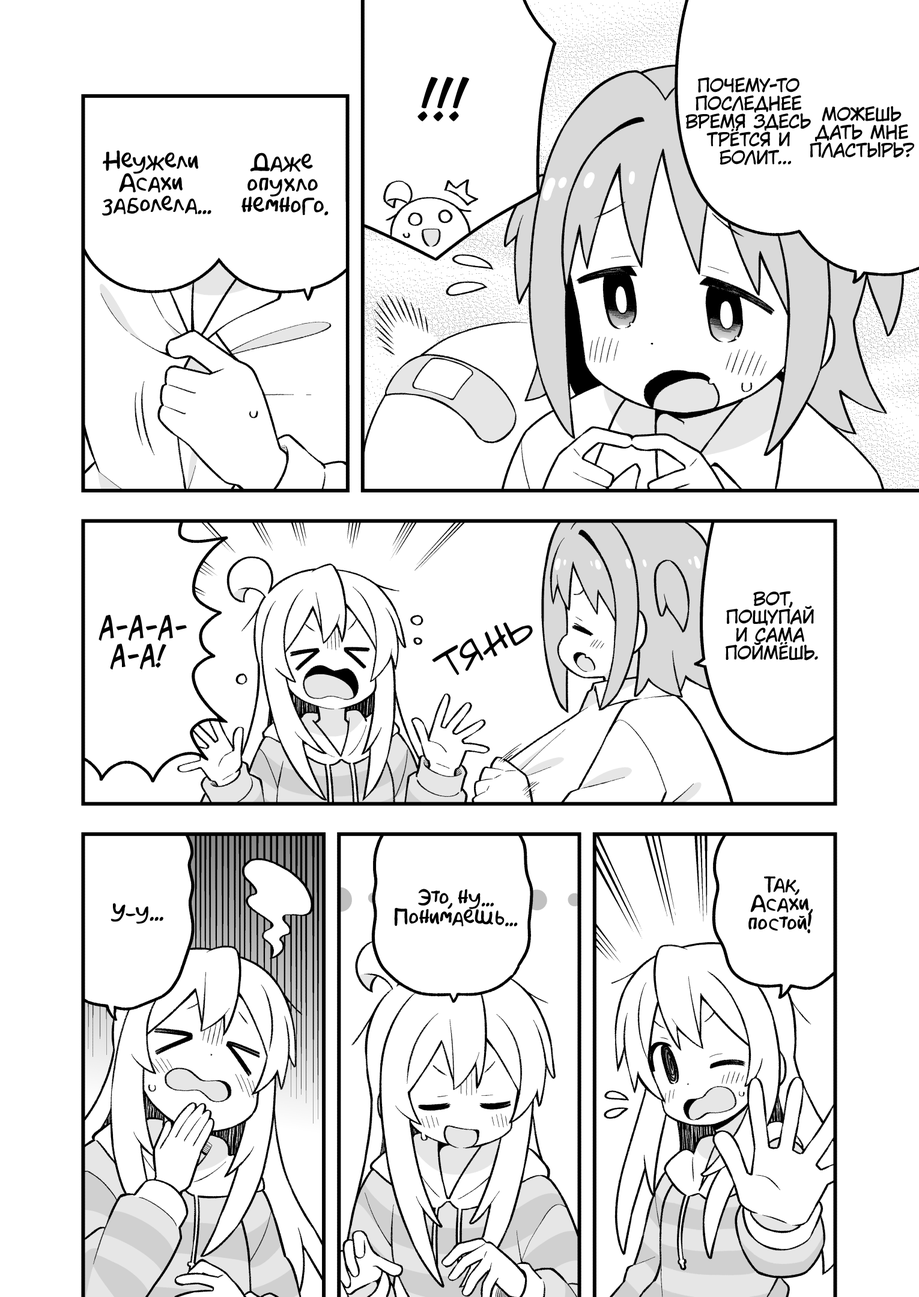
<style>
.page{position:relative;width:919px;height:1297px;background:#ffffff}
.page>*{position:absolute;margin:0}
.t1{font:54.1px "v_CCJeffCampbell";color:#000000;text-transform:uppercase}
.t2{font:18px "KuraiVoice2";color:#000000;text-transform:uppercase}
.t3{font:21.6px "AkbarPlain";color:#000000}
.t4{font:28.8px "v_CCJeffCampbell";color:#000000;text-transform:uppercase}
.t5{font:36px "v_Augie";color:#000000;text-transform:uppercase}
.t6{font:19.8px "AkbarPlain";color:#000000}
</style>
<div class="page">
<p class="t1" style="left:417px;top:77px;width:53px;height:44px">!!!</p>
<p class="t2" style="left:685px;top:77px;width:126px;height:88px;text-align:center">Почему-то<br>последнее<br>время здесь<br>трётся и<br>болит...</p>
<p class="t2" style="left:810px;top:106px;width:104px;height:52px;text-align:center">Можешь<br>дать мне<br>пластырь?</p>
<p class="t3" style="left:102px;top:150px;width:109px;height:66px;text-align:center">Неужели<br>Асахи<br>заболела...</p>
<p class="t3" style="left:241px;top:153px;width:88px;height:63px;text-align:center">Даже<br>опухло<br>немного.</p>
<p class="t2" style="left:726px;top:591px;width:92px;height:70px;text-align:center">Вот,<br>пощупай<br>и сама<br>поймёшь.</p>
<p class="t4" style="left:99px;top:615px;width:88px;height:55px;text-align:center">А-а-а-<br>а-а!</p>
<p class="t5" style="left:432px;top:622px;width:101px;height:54px;rotate:-26deg">тянь</p>
<p class="t6" style="left:748px;top:876px;width:65px;height:58px;text-align:center">Так,<br>Асахи,<br>постой!</p>
<p class="t6" style="left:394px;top:889px;width:124px;height:38px;text-align:center">Это, ну...<br>Понимаешь...</p>
<p class="t3" style="left:111px;top:903px;width:52px;height:21px">У-у...</p>
</div>
